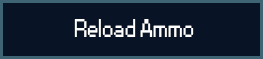
<style>
.page{position:relative;width:263px;height:59px;background:#081426}
.page>*{position:absolute;margin:0}
.t1{font:24px "Small Fonts";color:#ffffff}
</style>
<div class="page">
<p class="t1" style="left:74px;top:19px;width:120px;height:18px">Reload Ammo</p>
</div>
